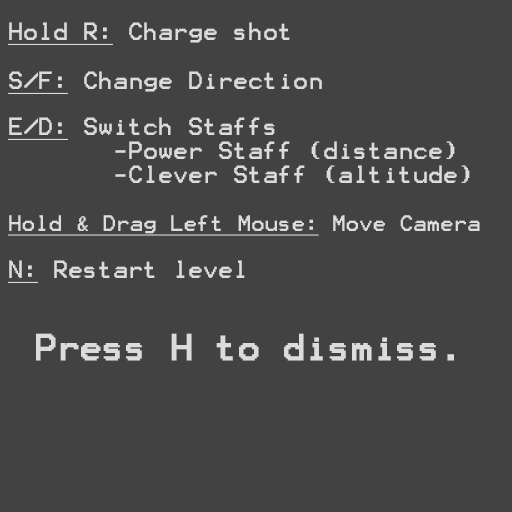
<style>
.page{position:relative;width:512px;height:512px;background:#424242}
.page>*{position:absolute;margin:0}
.t1{font:20px "Terminal";color:#dcdcdc}
.t2{font:20px "Terminal";color:#dcdcdc;text-decoration:underline}
.t3{font:18px "Terminal";color:#dcdcdc;text-decoration:underline}
.t4{font:18px "Terminal";color:#dcdcdc}
.t5{font:30px "Terminal";color:#dcdcdc;font-weight:bold}
</style>
<div class="page">
<p class="t1" style="left:8px;top:22px;width:282px;height:23px"><span class="t2">Hold R:</span> Charge shot</p>
<p class="t1" style="left:8px;top:71px;width:314px;height:23px"><span class="t2">S/F:</span> Change Direction</p>
<p class="t1" style="left:8px;top:117px;width:462px;height:66px"><span class="t2">E/D:</span> Switch Staffs<br>       -Power Staff (distance)<br>       -Clever Staff (altitude)</p>
<p class="t3" style="left:8px;top:215px;width:472px;height:21px">Hold &amp; Drag Left Mouse:<span class="t4"> Move Camera</span></p>
<p class="t1" style="left:8px;top:260px;width:237px;height:23px"><span class="t2">N:</span> Restart level</p>
<p class="t5" style="left:36px;top:333px;width:418px;height:28px">Press H to dismiss.</p>
</div>
